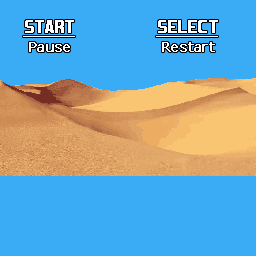
<style>
.page{position:relative;width:256px;height:256px;background:#39acf5}
.page>*{position:absolute;margin:0}
.t1{font:16px/19px "Unispace-Bold";color:#ffffff;font-weight:bold;text-decoration:underline}
.t2{font:14px/19px "Verdana";color:#ffffff;font-weight:bold}
</style>
<div class="page">
<p class="t1" style="left:23px;top:20px;width:52px;height:32px;text-align:center">START<br><span class="t2">Pause</span></p>
<p class="t2" style="left:156px;top:20px;width:62px;height:32px;text-align:center"><span class="t1">SELECT<br></span>Restart</p>
</div>
